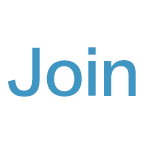
<style>
.page{position:relative;width:144px;height:144px;background:#ffffff}
.page>*{position:absolute;margin:0}
.t1{font:60px "FZLTZHK--GBK1-0";color:#3f96c3}
</style>
<div class="page">
<p class="t1" style="left:8px;top:47px;width:128px;height:50px">Join</p>
</div>
